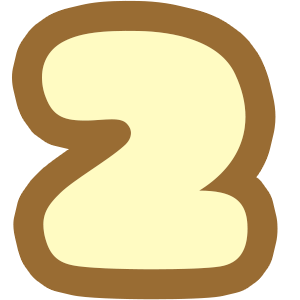
<style>
.page{position:relative;width:300px;height:300px;background:#fffbc2}
.page>*{position:absolute;margin:0}
.t1{font:313.1px "AmeChanPopMaruLight-Regular";letter-spacing:0.08em;color:#fffbc2;scale:1.1 1}
</style>
<div class="page">
<p class="t1" style="left:42px;top:30px;width:206px;height:240px">2</p>
</div>
